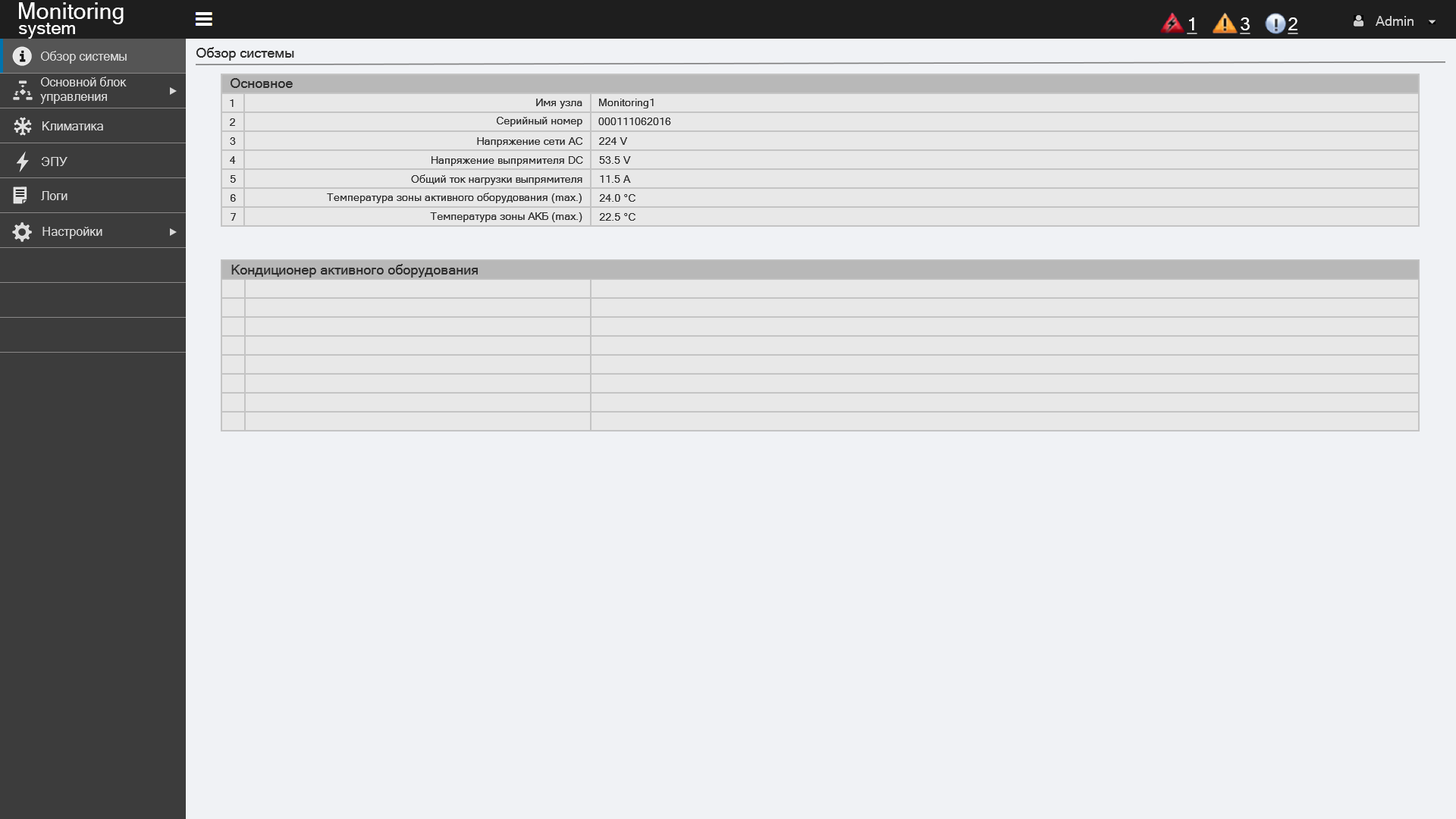
<style>
.page{position:relative;width:1456px;height:819px;background:#f0f2f5}
.page>*{position:absolute;margin:0}
.t1{font:22.7px "MicrosoftSansSerif";color:#ffffff}
.t2{font:18.2px "MicrosoftSansSerif";color:#ffffff;text-decoration:underline}
.t3{font:13.6px "MicrosoftSansSerif";color:#cccccc}
.t4{font:18.2px "MicrosoftSansSerif";color:#ffffff}
.t5{font:12.1px "MicrosoftSansSerif";color:#d9d9d9}
.t6{font:13.6px "MicrosoftSansSerif";color:#2f2f2f}
.t7{font:10.6px "MicrosoftSansSerif";color:#2f2f2f}
</style>
<div class="page">
<p class="t1" style="left:19px;top:2px;width:105px;height:22px">Monitoring</p>
<p class="t2" style="left:1187px;top:17px;width:10px;height:17px">1</p>
<p class="t2" style="left:1240px;top:17px;width:10px;height:17px">3</p>
<p class="t2" style="left:1288px;top:17px;width:10px;height:17px">2</p>
<p class="t3" style="left:1376px;top:16px;width:38px;height:10px">Admin</p>
<p class="t4" style="left:19px;top:23px;width:56px;height:16px">system</p>
<p class="t5" style="left:41px;top:51px;width:86px;height:13px">Обзор системы</p>
<p class="t6" style="left:196px;top:47px;width:98px;height:14px">Обзор системы</p>
<p class="t5" style="left:40px;top:77px;width:87px;height:27px">Основной блок <br>управления</p>
<p class="t6" style="left:231px;top:78px;width:62px;height:10px">Основное</p>
<p class="t7" style="left:230px;top:99px;width:4px;height:8px">1</p>
<p class="t7" style="left:536px;top:99px;width:46px;height:9px">Имя узла</p>
<p class="t7" style="left:599px;top:99px;width:55px;height:9px">Monitoring1</p>
<p class="t5" style="left:42px;top:121px;width:61px;height:9px">Климатика</p>
<p class="t7" style="left:230px;top:118px;width:5px;height:8px">2</p>
<p class="t7" style="left:497px;top:117px;width:85px;height:10px">Серийный номер</p>
<p class="t7" style="left:598px;top:118px;width:73px;height:7px">000111062016</p>
<p class="t7" style="left:230px;top:137px;width:6px;height:8px">3</p>
<p class="t7" style="left:477px;top:137px;width:105px;height:10px">Напряжение сети AC</p>
<p class="t7" style="left:599px;top:137px;width:28px;height:8px">224 V</p>
<p class="t5" style="left:42px;top:157px;width:25px;height:9px">ЭПУ</p>
<p class="t7" style="left:230px;top:156px;width:6px;height:8px">4</p>
<p class="t7" style="left:431px;top:156px;width:152px;height:10px">Напряжение выпрямителя DC</p>
<p class="t7" style="left:599px;top:156px;width:32px;height:8px">53.5 V</p>
<p class="t7" style="left:231px;top:175px;width:5px;height:8px">5</p>
<p class="t7" style="left:411px;top:174px;width:171px;height:11px">Общий ток нагрузки выпрямителя</p>
<p class="t7" style="left:600px;top:175px;width:31px;height:8px">11.5 A</p>
<p class="t5" style="left:41px;top:191px;width:26px;height:9px">Логи</p>
<p class="t7" style="left:231px;top:194px;width:5px;height:8px">6</p>
<p class="t7" style="left:327px;top:193px;width:255px;height:10px">Температура зоны активного оборудования (max.)</p>
<p class="t7" style="left:599px;top:194px;width:36px;height:8px">24.0 °С</p>
<p class="t7" style="left:231px;top:213px;width:5px;height:8px">7</p>
<p class="t7" style="left:430px;top:212px;width:152px;height:10px">Температура зоны АКБ (max.)</p>
<p class="t7" style="left:599px;top:213px;width:36px;height:8px">22.5 °С</p>
<p class="t5" style="left:42px;top:227px;width:60px;height:12px">Настройки</p>
<p class="t6" style="left:231px;top:264px;width:247px;height:14px">Кондиционер активного оборудования</p>
</div>
